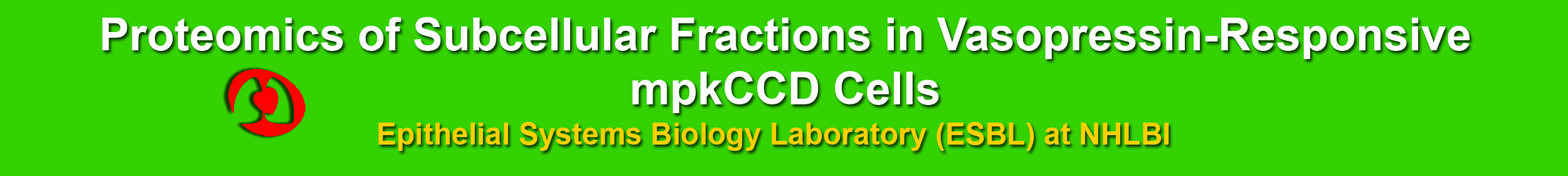
<style>
.page{position:relative;width:1568px;height:176px;background:#33d200}
.page>*{position:absolute;margin:0}
.t1{font:45.1px "Arial-BoldMT";color:#ffffff}
.t2{font:30.1px "Arial-BoldMT";color:#fecf00}
</style>
<div class="page">
<p class="t1" style="left:102px;top:17px;width:1368px;height:96px;text-align:center">Proteomics of Subcellular Fractions in Vasopressin-Responsive<br>mpkCCD Cells</p>
<p class="t2" style="left:378px;top:122px;width:791px;height:29px">Epithelial Systems Biology Laboratory (ESBL) at NHLBI</p>
</div>
